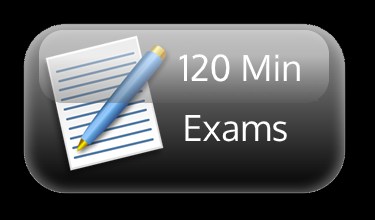
<style>
.page{position:relative;width:375px;height:220px;background:#000000}
.page>*{position:absolute;margin:0}
.t1{font:36px "Oxygen-Regular";color:#ffffff}
</style>
<div class="page">
<p class="t1" style="left:179px;top:54px;width:121px;height:28px">120 Min</p>
<p class="t1" style="left:185px;top:115px;width:102px;height:27px">Exams</p>
</div>
